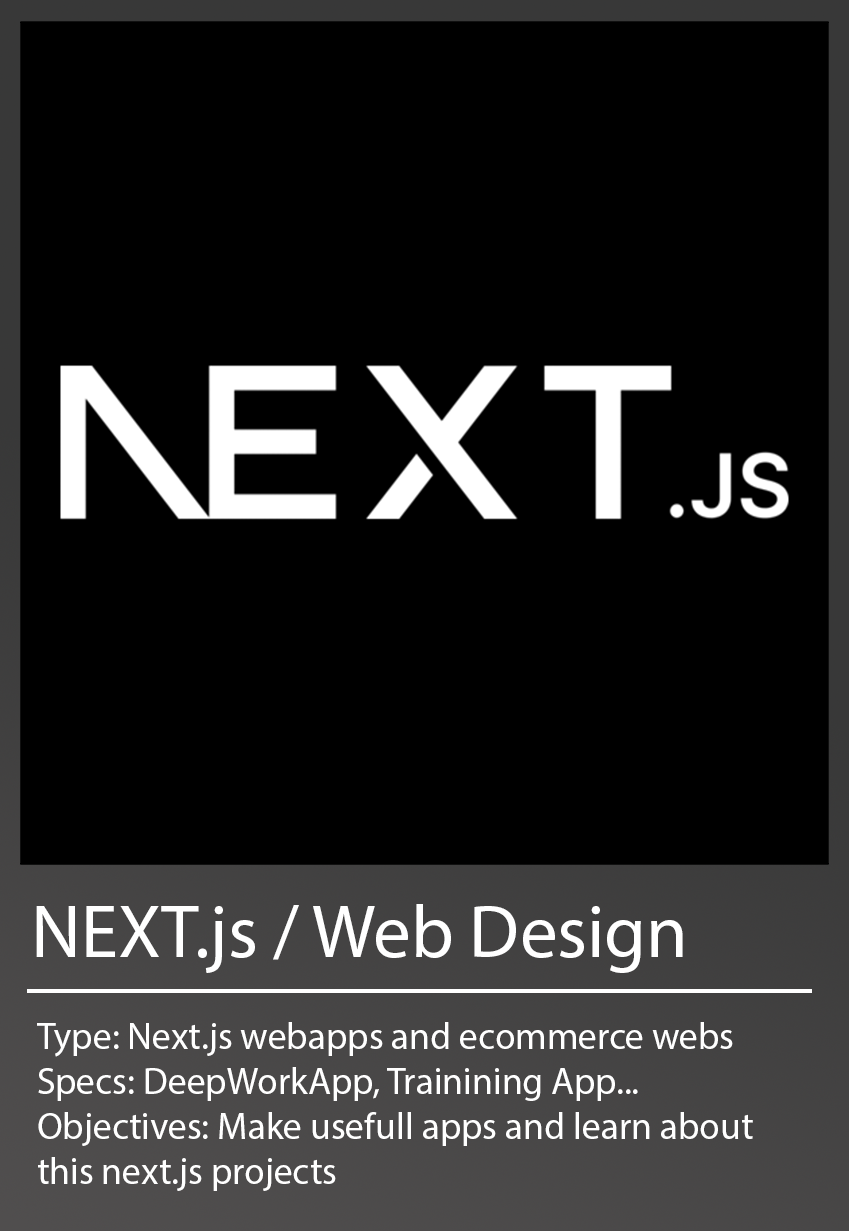
<style>
.page{position:relative;width:849px;height:1231px;background:#000000}
.page>*{position:absolute;margin:0}
.t1{font:75px "MyriadPro-Regular";color:#ffffff}
.t2{font:37.5px "MyriadPro-Regular";color:#ffffff}
</style>
<div class="page">
<p class="t1" style="left:36px;top:904px;width:647px;height:69px">NEXT.js / Web Design</p>
<p class="t2" style="left:37px;top:1022px;width:716px;height:169px">Type: Next.js webapps and ecommerce webs<br>Specs: DeepWorkApp, Trainining App...<br>Objectives: Make usefull apps and learn about this next.js projects</p>
</div>
